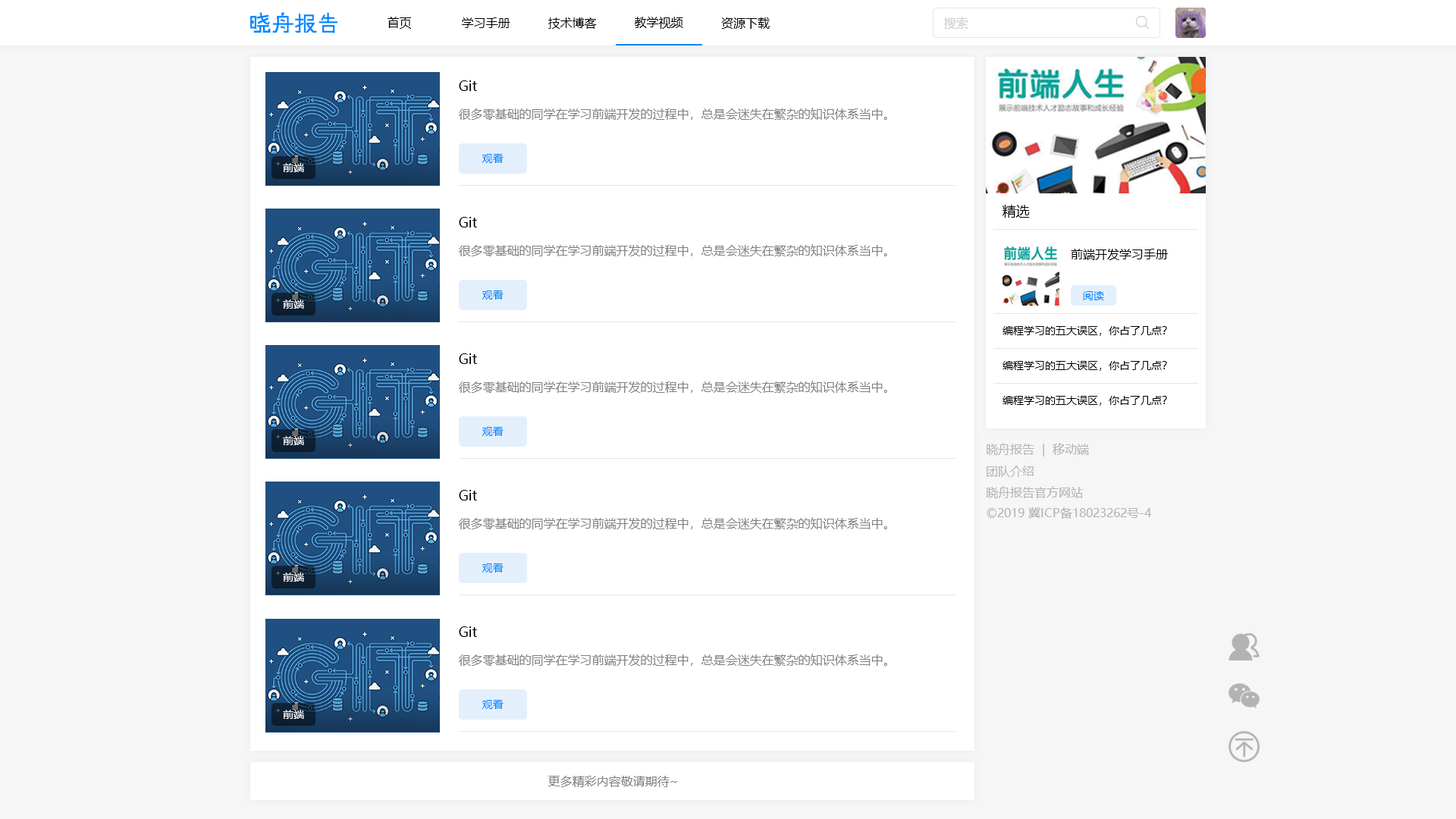
<style>
.page{position:relative;width:1456px;height:819px;background:#ffffff}
.page>*{position:absolute;margin:0}
.t1{font:12.1px "MicrosoftYaHei";color:#000000}
.t2{font:12.1px "MicrosoftYaHei";color:#cccccc}
.t3{font:13.6px "MicrosoftYaHei";color:#000000}
.t4{font:12.1px "MicrosoftYaHei";color:#808080}
.t5{font:10.6px "MicrosoftYaHei";color:#0084ff}
.t6{font:10.6px "MicrosoftYaHei";color:#ffffff}
.t7{font:10.6px "MicrosoftYaHei";color:#000000}
.t8{font:12.1px "MicrosoftYaHei";color:#b3b3b3}
</style>
<div class="page">
<p class="t1" style="left:388px;top:17px;width:24px;height:12px">首页</p>
<p class="t1" style="left:462px;top:17px;width:48px;height:11px">学习手册</p>
<p class="t1" style="left:548px;top:17px;width:49px;height:12px">技术博客</p>
<p class="t1" style="left:635px;top:17px;width:48px;height:12px">教学视频</p>
<p class="t1" style="left:721px;top:17px;width:49px;height:12px">资源下载</p>
<p class="t2" style="left:944px;top:17px;width:24px;height:12px">搜索</p>
<p class="t3" style="left:459px;top:80px;width:18px;height:11px">Git</p>
<p class="t4" style="left:459px;top:108px;width:428px;height:12px">很多零基础的同学在学习前端开发的过程中，总是会迷失在繁杂的知识体系当中。</p>
<p class="t5" style="left:482px;top:154px;width:22px;height:9px">观看</p>
<p class="t6" style="left:283px;top:163px;width:21px;height:9px">前端</p>
<p class="t3" style="left:1003px;top:205px;width:27px;height:13px">精选</p>
<p class="t3" style="left:459px;top:217px;width:18px;height:10px">Git</p>
<p class="t4" style="left:459px;top:244px;width:428px;height:12px">很多零基础的同学在学习前端开发的过程中，总是会迷失在繁杂的知识体系当中。</p>
<p class="t1" style="left:1071px;top:249px;width:97px;height:11px">前端开发学习手册</p>
<p class="t5" style="left:482px;top:290px;width:22px;height:10px">观看</p>
<p class="t5" style="left:1083px;top:291px;width:21px;height:9px">阅读</p>
<p class="t6" style="left:283px;top:300px;width:21px;height:9px">前端</p>
<p class="t7" style="left:1003px;top:326px;width:164px;height:10px">编程学习的五大误区，你占了几点？</p>
<p class="t3" style="left:459px;top:353px;width:18px;height:11px">Git</p>
<p class="t7" style="left:1003px;top:361px;width:164px;height:10px">编程学习的五大误区，你占了几点？</p>
<p class="t4" style="left:459px;top:381px;width:428px;height:12px">很多零基础的同学在学习前端开发的过程中，总是会迷失在繁杂的知识体系当中。</p>
<p class="t7" style="left:1003px;top:396px;width:164px;height:10px">编程学习的五大误区，你占了几点？</p>
<p class="t6" style="left:283px;top:436px;width:21px;height:9px">前端</p>
<p class="t5" style="left:482px;top:427px;width:22px;height:9px">观看</p>
<p class="t8" style="left:987px;top:443px;width:102px;height:14px">晓舟报告  |  移动端</p>
<p class="t8" style="left:987px;top:466px;width:47px;height:11px">团队介绍</p>
<p class="t3" style="left:459px;top:490px;width:18px;height:10px">Git</p>
<p class="t8" style="left:987px;top:486px;width:96px;height:12px">晓舟报告官方网站</p>
<p class="t8" style="left:987px;top:507px;width:165px;height:12px">©2019 冀ICP备18023262号-4</p>
<p class="t4" style="left:459px;top:517px;width:428px;height:12px">很多零基础的同学在学习前端开发的过程中，总是会迷失在繁杂的知识体系当中。</p>
<p class="t5" style="left:482px;top:563px;width:22px;height:10px">观看</p>
<p class="t6" style="left:283px;top:573px;width:21px;height:9px">前端</p>
<p class="t3" style="left:459px;top:626px;width:18px;height:11px">Git</p>
<p class="t4" style="left:459px;top:654px;width:428px;height:12px">很多零基础的同学在学习前端开发的过程中，总是会迷失在繁杂的知识体系当中。</p>
<p class="t5" style="left:482px;top:700px;width:22px;height:9px">观看</p>
<p class="t6" style="left:283px;top:710px;width:21px;height:9px">前端</p>
<p class="t4" style="left:548px;top:776px;width:129px;height:11px">更多精彩内容敬请期待~</p>
</div>
